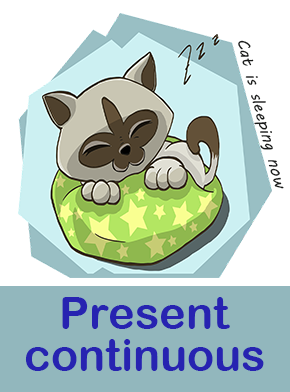
<style>
.page{position:relative;width:290px;height:392px;background:#ffffff}
.page>*{position:absolute;margin:0}
.t1{font:17px "MVBoli";color:#191a19}
.t2{font:45px "ArialRoundedMTBold";color:#2723b1}
</style>
<div class="page">
<p class="t1" style="left:238px;top:40px;width:46px;height:149px;rotate:75deg">Cat is sleeping now</p>
<p class="t2" style="left:62px;top:297px;width:168px;height:32px">Present</p>
<p class="t2" style="left:25px;top:339px;width:239px;height:32px">continuous</p>
</div>
